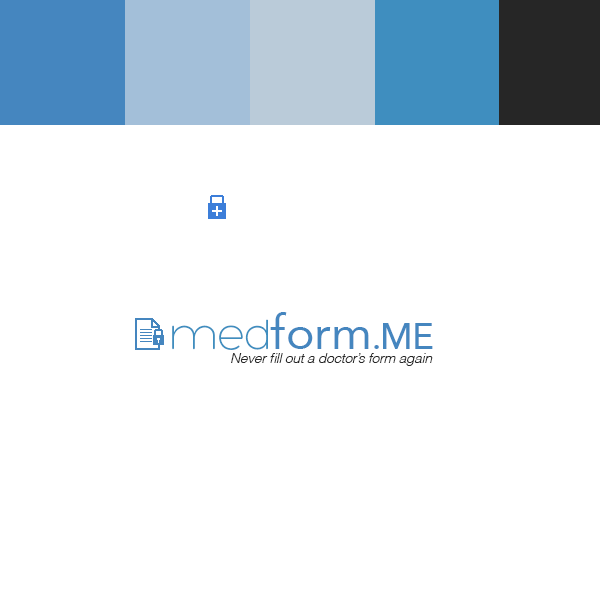
<style>
.page{position:relative;width:600px;height:600px;background:#ffffff}
.page>*{position:absolute;margin:0}
.t1{font:48px "Avenir-Roman";color:#4586bf}
.t2{font:45px "Hero-Light";letter-spacing:-0.025em;color:#3f8ebf}
.t3{font:48px "KhmerMN";letter-spacing:-0.025em;color:#4586bf}
.t4{font:36px "Avenir-Medium";letter-spacing:-0.025em;color:#4586bf}
.t5{font:36px "Avenir-Medium";color:#4586bf}
.t6{font:14px "Helvetica-LightOblique";letter-spacing:-0.025em;color:#262626}
</style>
<div class="page">
<p class="t1" style="left:172px;top:312px;width:261px;height:38px"><span class="t2">med</span>form<span class="t3">.</span><span class="t4">M</span><span class="t5">E</span></p>
<p class="t6" style="left:231px;top:353px;width:202px;height:13px">Never fill out a doctor’s form again</p>
</div>
